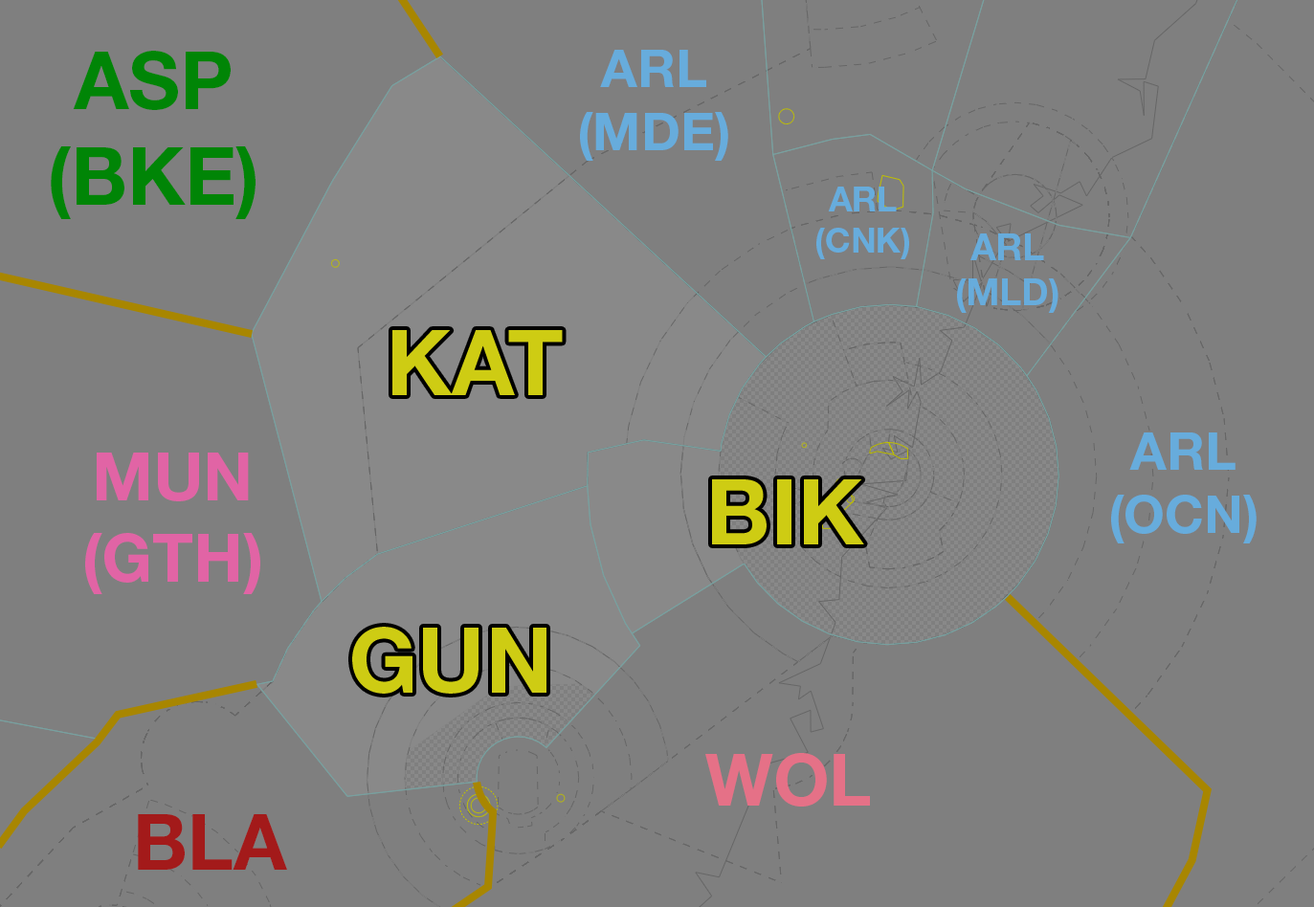
<style>
.page{position:relative;width:1314px;height:907px;background:#7f7f7f}
.page>*{position:absolute;margin:0}
.t1{font:80.4px "HelveticaNeueLTStd-Bd";color:#008506}
.t2{font:52.8px "HelveticaNeueLTStd-Bd";color:#67acdc}
.t3{font:34.5px "HelveticaNeueLTStd-Bd";color:#67acdc}
.t4{font:37px "HelveticaNeueLTStd-Bd";color:#67acdc}
.t5{font:91.3px "HelveticaNeueLTStd-Bd";color:#cecc13}
.t6{font:52.4px "HelveticaNeueLTStd-Bd";color:#67acdc}
.t7{font:67.6px "HelveticaNeueLTStd-Bd";color:#e164a5}
.t8{font:71.8px "HelveticaNeueLTStd-Bd";color:#e57187}
.t9{font:77.6px "HelveticaNeueLTStd-Bd";color:#a31a1a}
</style>
<div class="page">
<p class="t1" style="left:51px;top:51px;width:205px;height:168px;text-align:center">ASP<br>(BKE)</p>
<p class="t2" style="left:580px;top:50px;width:148px;height:111px;text-align:center">ARL<br>(MDE)</p>
<p class="t3" style="left:816px;top:187px;width:93px;height:72px;text-align:center">ARL<br>(CNK)</p>
<p class="t4" style="left:957px;top:234px;width:102px;height:79px;text-align:center">ARL<br>(MLD)</p>
<p class="t5" style="left:392px;top:330px;width:171px;height:65px">KAT</p>
<p class="t6" style="left:1111px;top:433px;width:146px;height:111px;text-align:center">ARL<br>(OCN)</p>
<p class="t7" style="left:85px;top:453px;width:175px;height:141px;text-align:center">MUN<br>(GTH)</p>
<p class="t5" style="left:712px;top:480px;width:152px;height:65px">BIK</p>
<p class="t5" style="left:352px;top:627px;width:195px;height:67px">GUN</p>
<p class="t8" style="left:705px;top:753px;width:165px;height:54px">WOL</p>
<p class="t9" style="left:138px;top:815px;width:149px;height:55px">BLA</p>
</div>
